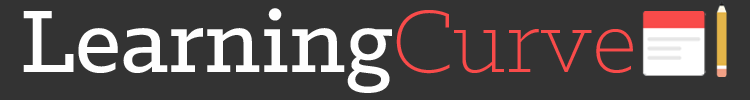
<style>
.page{position:relative;width:750px;height:100px;background:#333333}
.page>*{position:absolute;margin:0}
.t1{font:100px "KlinicSlab-Medium";color:#fefefe}
.t2{font:100px "KlinicSlab-Light";color:#f94b4a}
</style>
<div class="page">
<p class="t1" style="left:23px;top:8px;width:369px;height:85px">Learning</p>
<p class="t2" style="left:396px;top:10px;width:237px;height:64px">Curve</p>
</div>
